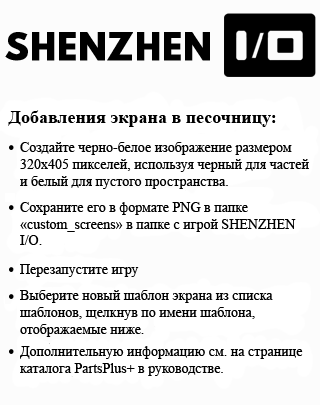
<style>
.page{position:relative;width:320px;height:405px;background:#ffffff}
.page>*{position:absolute;margin:0}
.t1{font:18px "TimesNewRomanPS-BoldMT";color:#000000}
.t2{font:14px "TimesNewRomanPSMT";color:#000000}
</style>
<div class="page">
<p class="t1" style="left:8px;top:110px;width:268px;height:17px">Добавления экрана в песочницу:</p>
<p class="t2" style="left:20px;top:142px;width:289px;height:47px">Создайте черно-белое изображение размером 320x405 пикселей, используя черный для частей и белый для пустого пространства.</p>
<p class="t2" style="left:20px;top:202px;width:276px;height:43px">Сохраните его в формате PNG в папке «custom_screens» в папке с игрой SHENZHEN I/O.</p>
<p class="t2" style="left:20px;top:264px;width:119px;height:13px">Перезапустите игру</p>
<p class="t2" style="left:20px;top:290px;width:253px;height:47px">Выберите новый шаблон экрана из списка шаблонов, щелкнув по имени шаблона, отображаемые ниже.</p>
<p class="t2" style="left:20px;top:346px;width:283px;height:30px">Дополнительную информацию см. на странице каталога PartsPlus+ в руководстве.</p>
</div>
